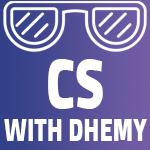
<style>
.page{position:relative;width:150px;height:150px}
.page>*{position:absolute;margin:0}
.t1{font:71px "Cairo-Black";color:#ffffff;scale:0.76 1}
.t2{font:33.5px "Cairo-Black";color:#ffffff;scale:0.71 1}
</style>
<div class="page">
<p class="t1" style="left:48px;top:59px;width:55px;height:50px">CS</p>
<p class="t2" style="left:4px;top:119px;width:143px;height:22px">WITH DHEMY</p>
</div>
